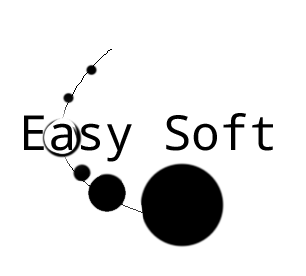
<style>
.page{position:relative;width:306px;height:276px;background:#ffffff}
.page>*{position:absolute;margin:0}
.t1{font:48.2px "DroidSansMono";color:#000000}
</style>
<div class="page">
<p class="t1" style="left:24px;top:113px;width:249px;height:49px">Easy Soft</p>
</div>
